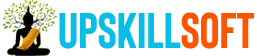
<style>
.page{position:relative;width:257px;height:56px;background:#ffffff}
.page>*{position:absolute;margin:0}
.t1{font:50px "Bison-Bold";color:#09bde5}
.t2{font:50px "Bison-Bold";color:#fc5400}
</style>
<div class="page">
<p class="t1" style="left:59px;top:12px;width:195px;height:37px">Upskill<span class="t2">soft</span></p>
</div>
